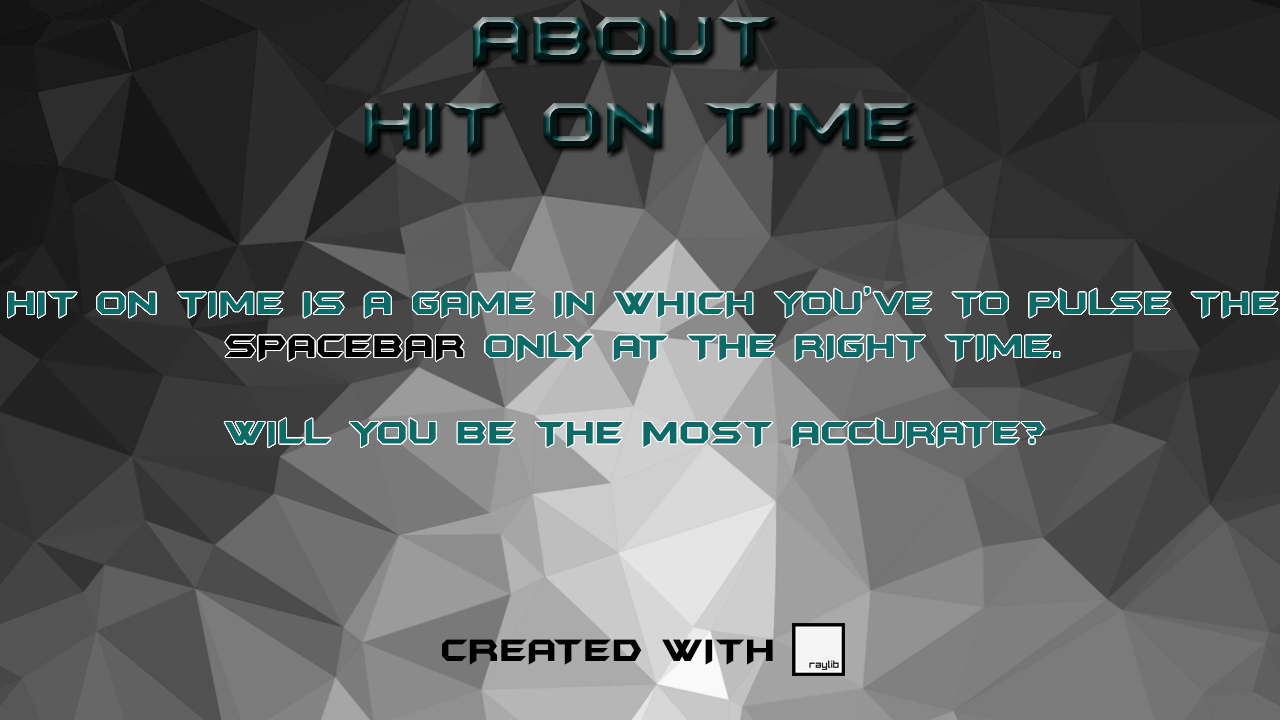
<style>
.page{position:relative;width:1280px;height:720px}
.page>*{position:absolute;margin:0}
.t1{font:36px "BatmanForeverAlternate";color:#0a6c69;text-transform:uppercase}
.t2{font:36px "BatmanForeverAlternate";color:#000000;text-transform:uppercase}
</style>
<div class="page">
<p class="t1" style="left:8px;top:287px;width:1271px;height:161px">hIT ON TIME IS A GAME IN WHICH YOU’VE TO PULSE THE<br><span class="t2">       spaceBAR</span> ONLY at THE right time. <br><br>       WILL YOU BE THE MOST ACCURATE?</p>
<p class="t2" style="left:442px;top:639px;width:331px;height:26px">CREATED WITH</p>
</div>
